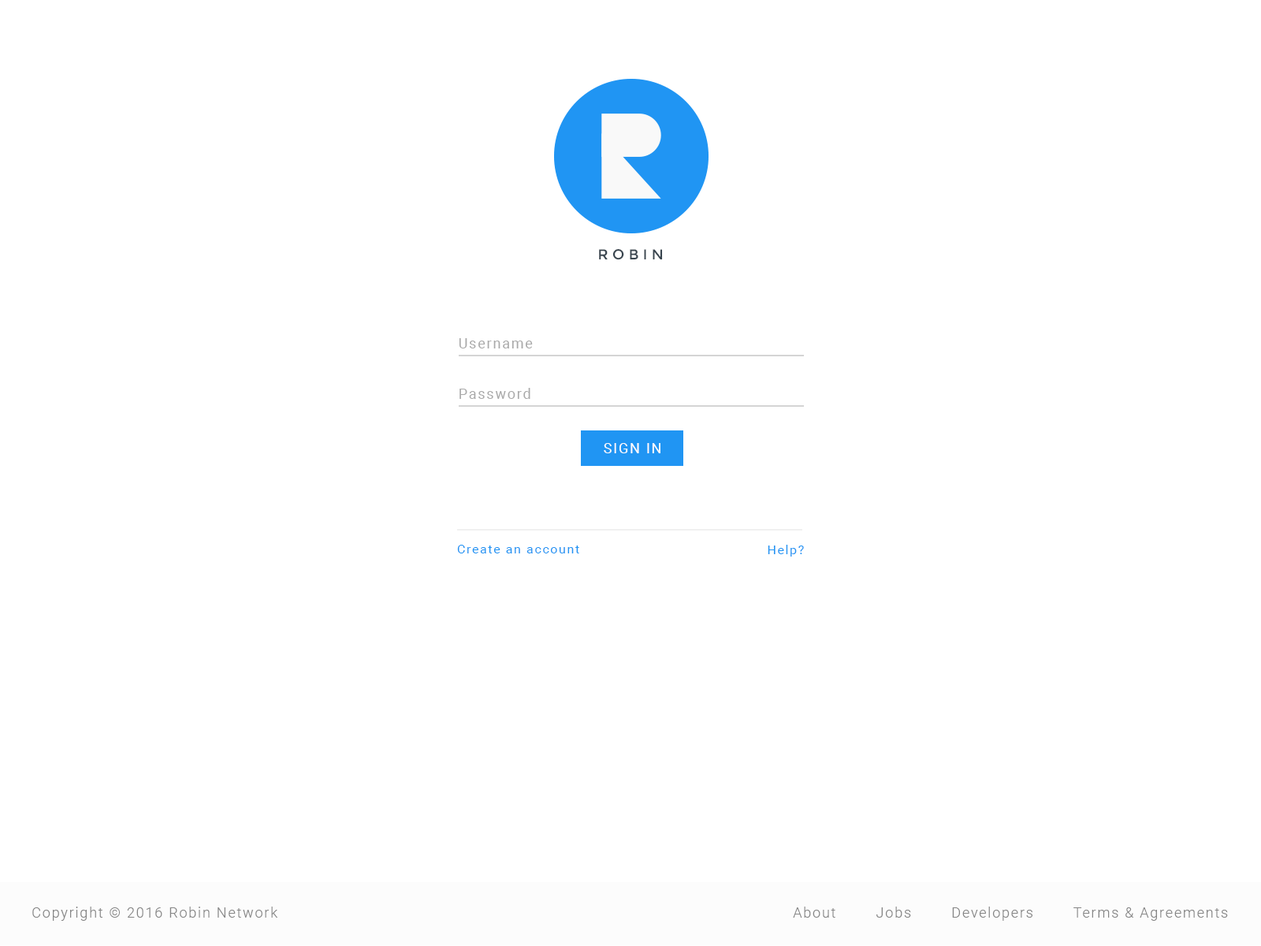
<style>
.page{position:relative;width:1261px;height:946px;background:#ffffff}
.page>*{position:absolute;margin:0}
.t1{font:14.2px "Montserrat-Regular";letter-spacing:0.3em;color:#38444e}
.t2{font:14.2px "Roboto-Regular";letter-spacing:0.1em;color:#aaaaaa}
.t3{font:14.2px "Roboto-Regular";letter-spacing:0.1em;color:#fcfcfc}
.t4{font:12.6px "Roboto-Regular";letter-spacing:0.1em;color:#2095f3}
.t5{font:14.2px "Roboto-Light";letter-spacing:0.1em;color:#858585}
</style>
<div class="page">
<p class="t1" style="left:599px;top:248px;width:64px;height:12px">ROBIN</p>
<p class="t2" style="left:459px;top:338px;width:74px;height:10px">Username</p>
<p class="t2" style="left:459px;top:388px;width:71px;height:11px">Password</p>
<p class="t3" style="left:604px;top:443px;width:56px;height:10px">SIGN IN</p>
<p class="t4" style="left:457px;top:545px;width:122px;height:8px">Create an account</p>
<p class="t4" style="left:768px;top:545px;width:36px;height:11px">Help?</p>
<p class="t5" style="left:32px;top:906px;width:246px;height:14px">Copyright © 2016 Robin Network</p>
<p class="t5" style="left:793px;top:906px;width:435px;height:14px">About        Jobs        Developers        Terms &amp; Agreements</p>
</div>
